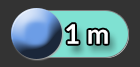
<style>
.page{position:relative;width:140px;height:67px;background:#333333}
.page>*{position:absolute;margin:0}
.t1{font:26.9px "Lato-Bold";color:#ffffff}
</style>
<div class="page">
<p class="t1" style="left:66px;top:24px;width:42px;height:20px">1 m</p>
</div>
